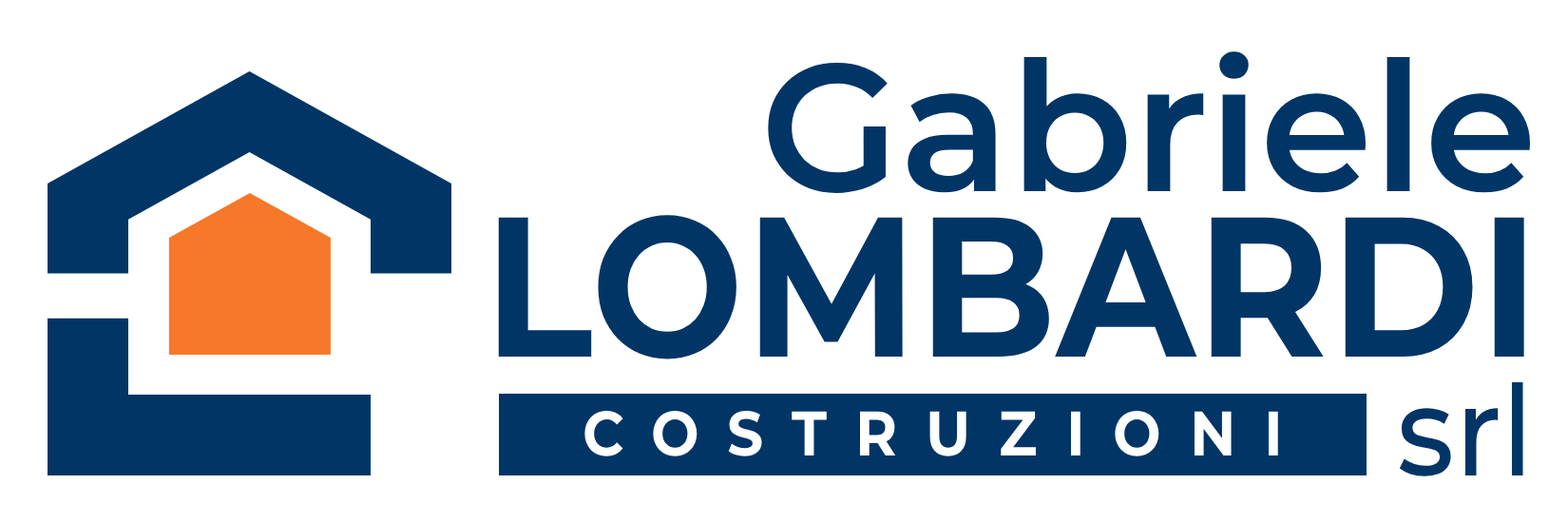
<style>
.page{position:relative;width:1568px;height:523px;background:#ffffff}
.page>*{position:absolute;margin:0}
.t1{font:180.6px "Montserrat-SemiBold";color:#003566}
.t2{font:198.6px "Montserrat-Bold";letter-spacing:0.005em;color:#003566;scale:0.91 1}
.t3{font:125.4px "Montserrat-Medium";letter-spacing:0.005em;color:#003566;scale:0.91 1}
.t4{font:62.7px "Montserrat-Bold";letter-spacing:0.5em;color:#ffffff;scale:0.91 1}
</style>
<div class="page">
<p class="t1" style="left:768px;top:51px;width:762px;height:142px">Gabriele</p>
<p class="t2" style="left:498px;top:215px;width:1026px;height:144px">LOMBARDI</p>
<p class="t3" style="left:1399px;top:382px;width:124px;height:94px">srl</p>
<p class="t4" style="left:584px;top:411px;width:694px;height:45px">COSTRUZIONI</p>
</div>
